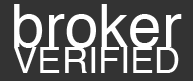
<style>
.page{position:relative;width:193px;height:81px;background:#333333}
.page>*{position:absolute;margin:0}
.t1{font:60px "Helvetica";color:#ffffff}
.t2{font:36px "Helvetica";color:#ffffff}
</style>
<div class="page">
<p class="t1" style="left:14px;top:4px;width:168px;height:44px">broker</p>
<p class="t2" style="left:14px;top:47px;width:165px;height:26px">VERIFIED</p>
</div>
